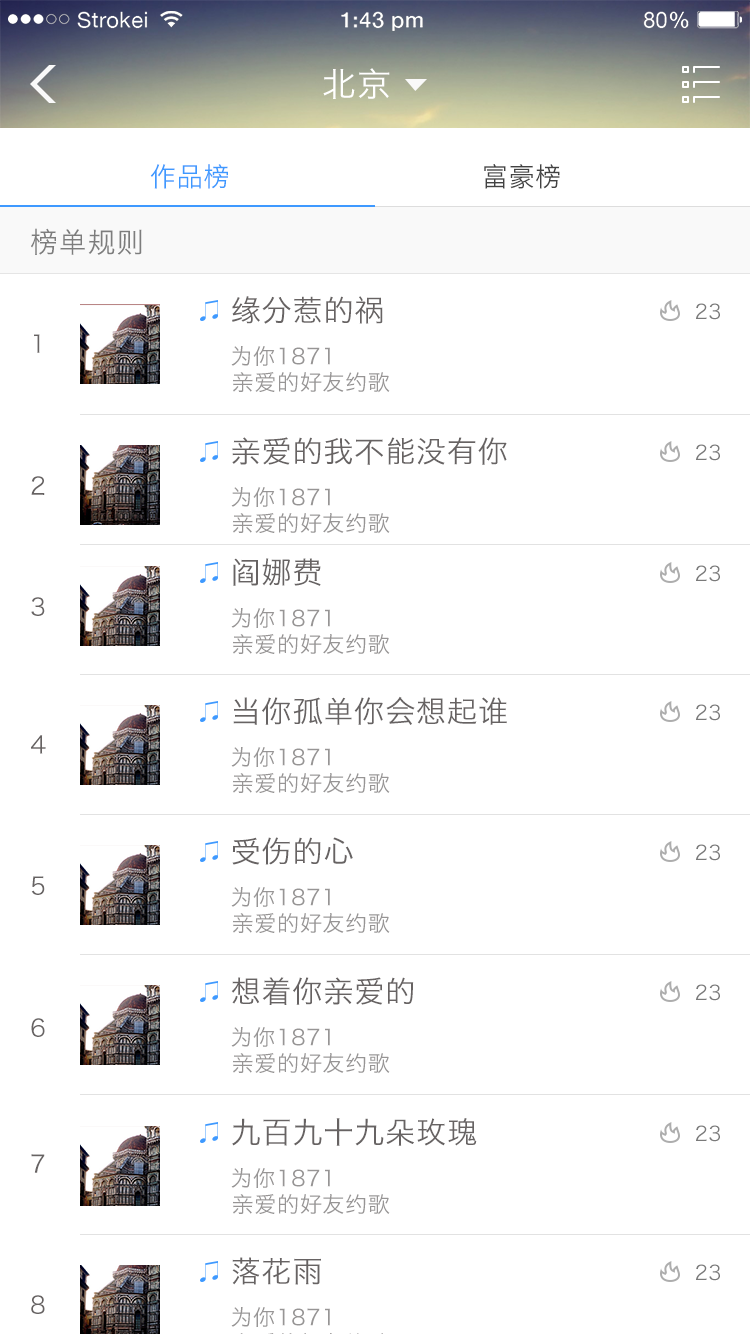
<style>
.page{position:relative;width:750px;height:1334px;background:#ffffff}
.page>*{position:absolute;margin:0}
.t1{font:33.9px "HiraginoSansGB-W3";letter-spacing:0.03em;color:#ffffff}
.t2{font:26.6px "HiraginoSansGB-W3";letter-spacing:0.03em;color:#3e99ff}
.t3{font:26.6px "HiraginoSansGB-W3";letter-spacing:0.03em;color:#424242}
.t4{font:28.4px "HiraginoSansGB-W3";letter-spacing:0.03em;color:#7d7d7d}
.t5{font:30px "HiraginoSansGB-W3";letter-spacing:0.03em;color:#676363}
.t6{font:20px "HiraginoSansGB-W3";letter-spacing:0.03em;color:#7b7b7b}
.t7{font:24.2px "HiraginoSansGB-W3";letter-spacing:0.03em;color:#676363}
.t8{font:22px "HiraginoSansGB-W3";letter-spacing:0.03em;color:#979595}
</style>
<div class="page">
<p class="t1" style="left:323px;top:68px;width:67px;height:31px">北京</p>
<p class="t2" style="left:150px;top:164px;width:78px;height:25px">作品榜</p>
<p class="t3" style="left:484px;top:164px;width:76px;height:25px">富豪榜</p>
<p class="t4" style="left:31px;top:228px;width:111px;height:27px">榜单规则</p>
<p class="t5" style="left:232px;top:296px;width:151px;height:28px">缘分惹的祸</p>
<p class="t6" style="left:696px;top:303px;width:24px;height:17px">23</p>
<p class="t7" style="left:34px;top:334px;width:6px;height:19px">1</p>
<p class="t8" style="left:231px;top:346px;width:99px;height:20px">为你1871</p>
<p class="t8" style="left:233px;top:372px;width:157px;height:21px">亲爱的好友约歌</p>
<p class="t5" style="left:232px;top:437px;width:275px;height:28px">亲爱的我不能没有你</p>
<p class="t6" style="left:696px;top:444px;width:24px;height:17px">23</p>
<p class="t7" style="left:31px;top:476px;width:14px;height:19px">2</p>
<p class="t8" style="left:231px;top:487px;width:99px;height:20px">为你1871</p>
<p class="t8" style="left:233px;top:513px;width:157px;height:21px">亲爱的好友约歌</p>
<p class="t5" style="left:233px;top:558px;width:88px;height:28px">阎娜费</p>
<p class="t6" style="left:696px;top:565px;width:24px;height:17px">23</p>
<p class="t7" style="left:31px;top:597px;width:14px;height:19px">3</p>
<p class="t8" style="left:231px;top:608px;width:99px;height:20px">为你1871</p>
<p class="t8" style="left:233px;top:634px;width:157px;height:21px">亲爱的好友约歌</p>
<p class="t5" style="left:233px;top:696px;width:274px;height:29px">当你孤单你会想起谁</p>
<p class="t6" style="left:696px;top:704px;width:24px;height:17px">23</p>
<p class="t7" style="left:31px;top:735px;width:15px;height:19px">4</p>
<p class="t8" style="left:231px;top:747px;width:99px;height:20px">为你1871</p>
<p class="t8" style="left:233px;top:773px;width:157px;height:21px">亲爱的好友约歌</p>
<p class="t5" style="left:232px;top:837px;width:121px;height:28px">受伤的心</p>
<p class="t6" style="left:696px;top:844px;width:24px;height:17px">23</p>
<p class="t7" style="left:31px;top:876px;width:14px;height:19px">5</p>
<p class="t8" style="left:231px;top:887px;width:99px;height:20px">为你1871</p>
<p class="t8" style="left:233px;top:913px;width:157px;height:21px">亲爱的好友约歌</p>
<p class="t5" style="left:231px;top:977px;width:183px;height:28px">想着你亲爱的</p>
<p class="t6" style="left:696px;top:984px;width:24px;height:17px">23</p>
<p class="t7" style="left:31px;top:1018px;width:14px;height:19px">6</p>
<p class="t8" style="left:231px;top:1027px;width:99px;height:20px">为你1871</p>
<p class="t8" style="left:233px;top:1053px;width:157px;height:21px">亲爱的好友约歌</p>
<p class="t5" style="left:232px;top:1118px;width:245px;height:28px">九百九十九朵玫瑰</p>
<p class="t6" style="left:696px;top:1125px;width:24px;height:17px">23</p>
<p class="t7" style="left:31px;top:1154px;width:14px;height:19px">7</p>
<p class="t8" style="left:231px;top:1168px;width:99px;height:20px">为你1871</p>
<p class="t8" style="left:233px;top:1194px;width:157px;height:21px">亲爱的好友约歌</p>
<p class="t5" style="left:232px;top:1257px;width:89px;height:28px">落花雨</p>
<p class="t6" style="left:696px;top:1264px;width:24px;height:17px">23</p>
<p class="t7" style="left:31px;top:1295px;width:14px;height:19px">8</p>
<p class="t8" style="left:231px;top:1307px;width:99px;height:20px">为你1871</p>
</div>
